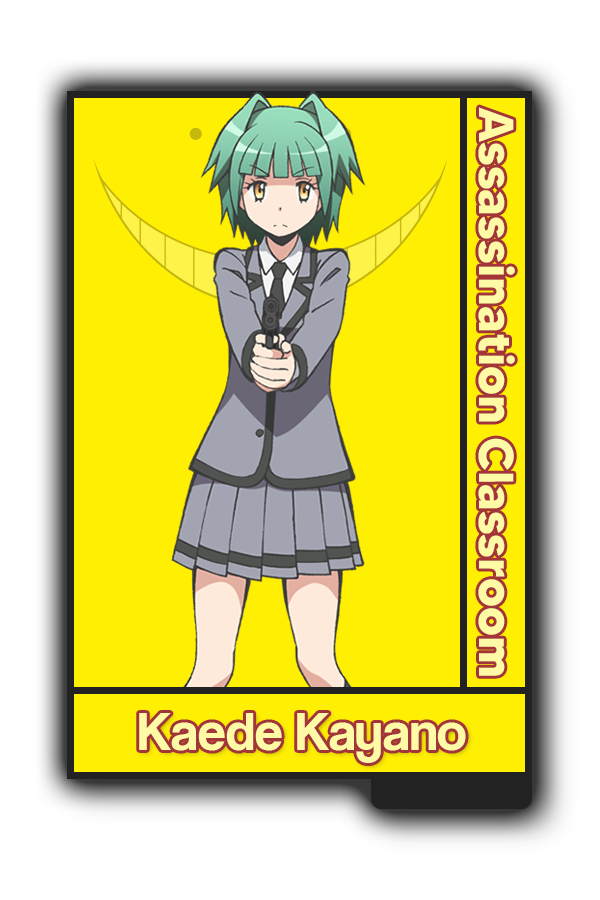
<style>
.page{position:relative;width:600px;height:900px;background:#ffef03}
.page>*{position:absolute;margin:0}
.t1{font:48.8px "MADETOMMY-Bold";color:#fefaa5}
.t2{font:55px "CoolveticaRg-Regular";color:#fefaa5}
</style>
<div class="page">
<p class="t1" style="left:478px;top:107px;width:37px;height:569px;rotate:90deg">Assassination Classroom</p>
<p class="t2" style="left:139px;top:713px;width:327px;height:50px">Kaede Kayano</p>
</div>
